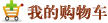
<style>
.page{position:relative;width:108px;height:23px;background:#ffffff}
.page>*{position:absolute;margin:0}
.t1{font:16px "ç»å¸ç²å®ç®-regular";letter-spacing:0.01em;color:#8d3a1a}
</style>
<div class="page">
<p class="t1" style="left:27px;top:4px;width:80px;height:16px">我的购物车</p>
</div>
